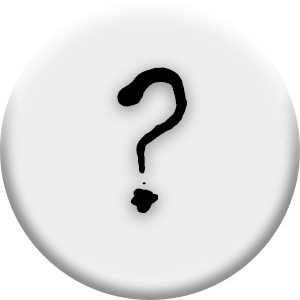
<style>
.page{position:relative;width:300px;height:300px;background:#ededed}
.page>*{position:absolute;margin:0}
.t1{font:234px "Chiller-Regular";letter-spacing:-0.1em;color:#000000}
</style>
<div class="page">
<p class="t1" style="left:117px;top:67px;width:70px;height:146px">?</p>
</div>
